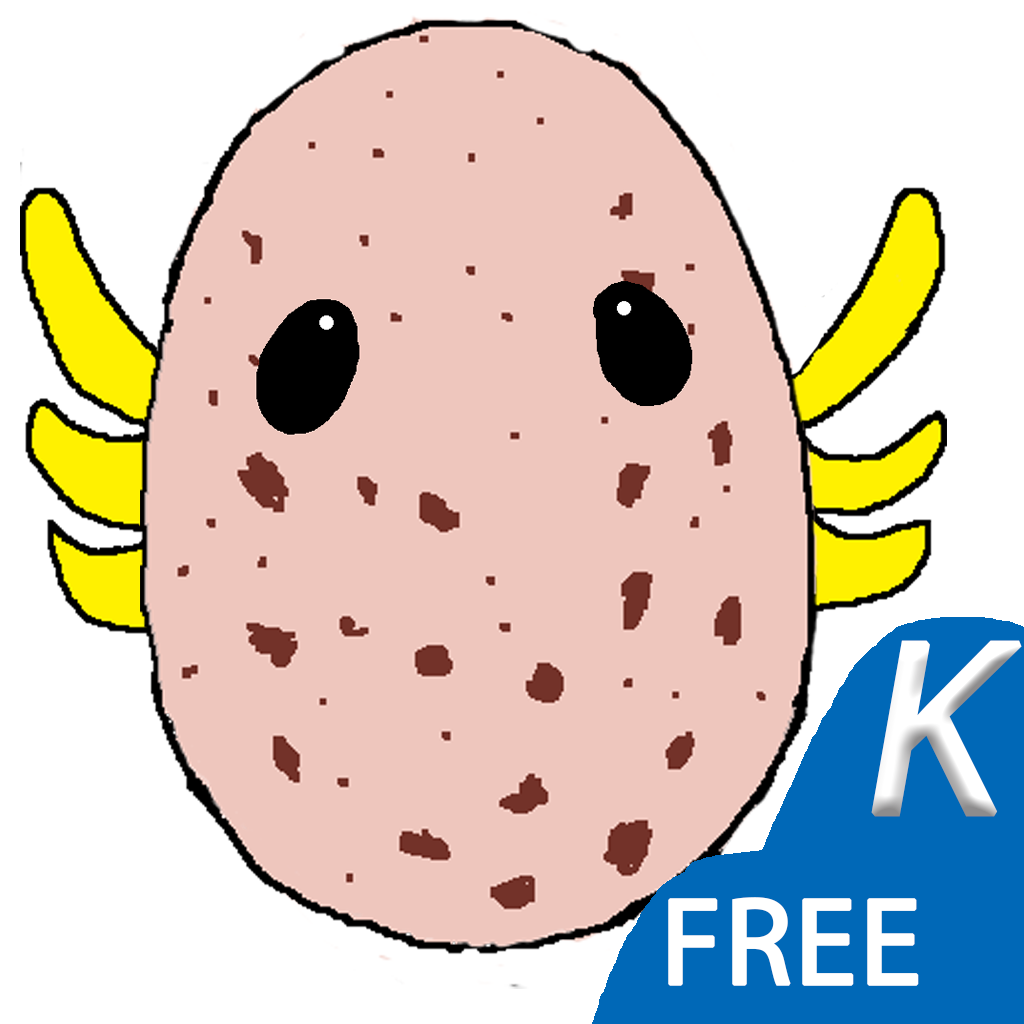
<style>
.page{position:relative;width:1024px;height:1024px;background:#eec6bd}
.page>*{position:absolute;margin:0}
.t1{font:125px "MyriadPro-Regular";color:#ffffff;text-transform:uppercase;font-weight:bold}
</style>
<div class="page">
<p class="t1" style="left:668px;top:897px;width:251px;height:89px">Free</p>
</div>
